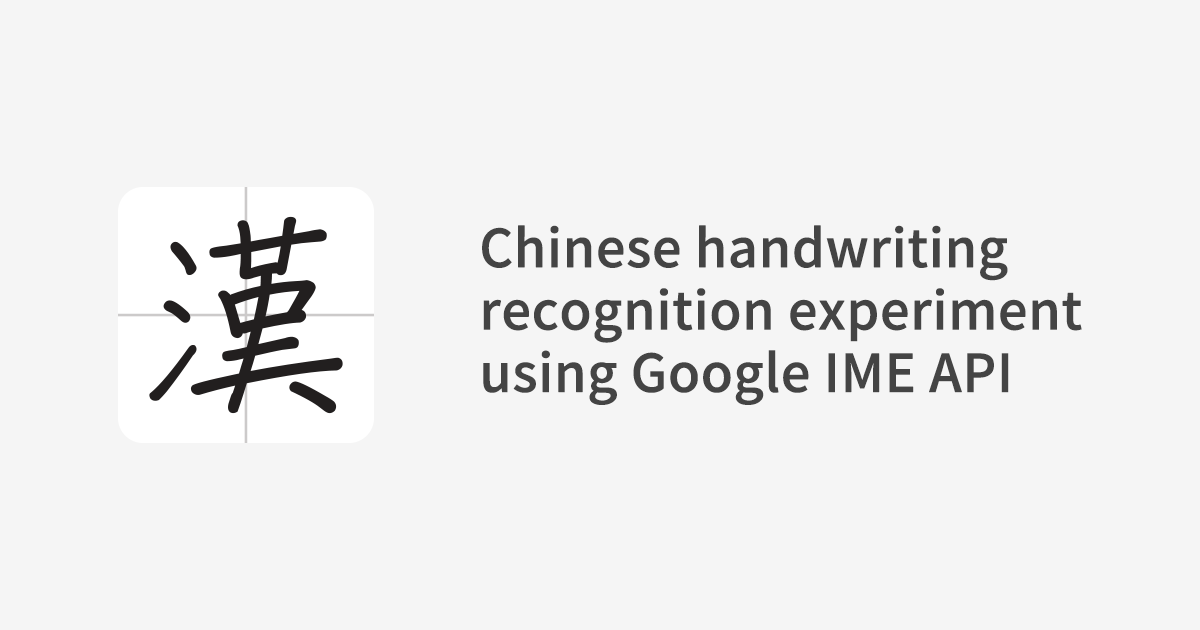
<style>
.page{position:relative;width:1200px;height:630px;background:#f5f5f5}
.page>*{position:absolute;margin:0}
.t1{font:52px "GenYoGothicTW-Medium-TTF";letter-spacing:-0.01em;color:#444444;font-weight:bold}
</style>
<div class="page">
<p class="t1" style="left:482px;top:225px;width:600px;height:180px">Chinese handwriting <br>recognition experiment <br>using Google IME API</p>
</div>
